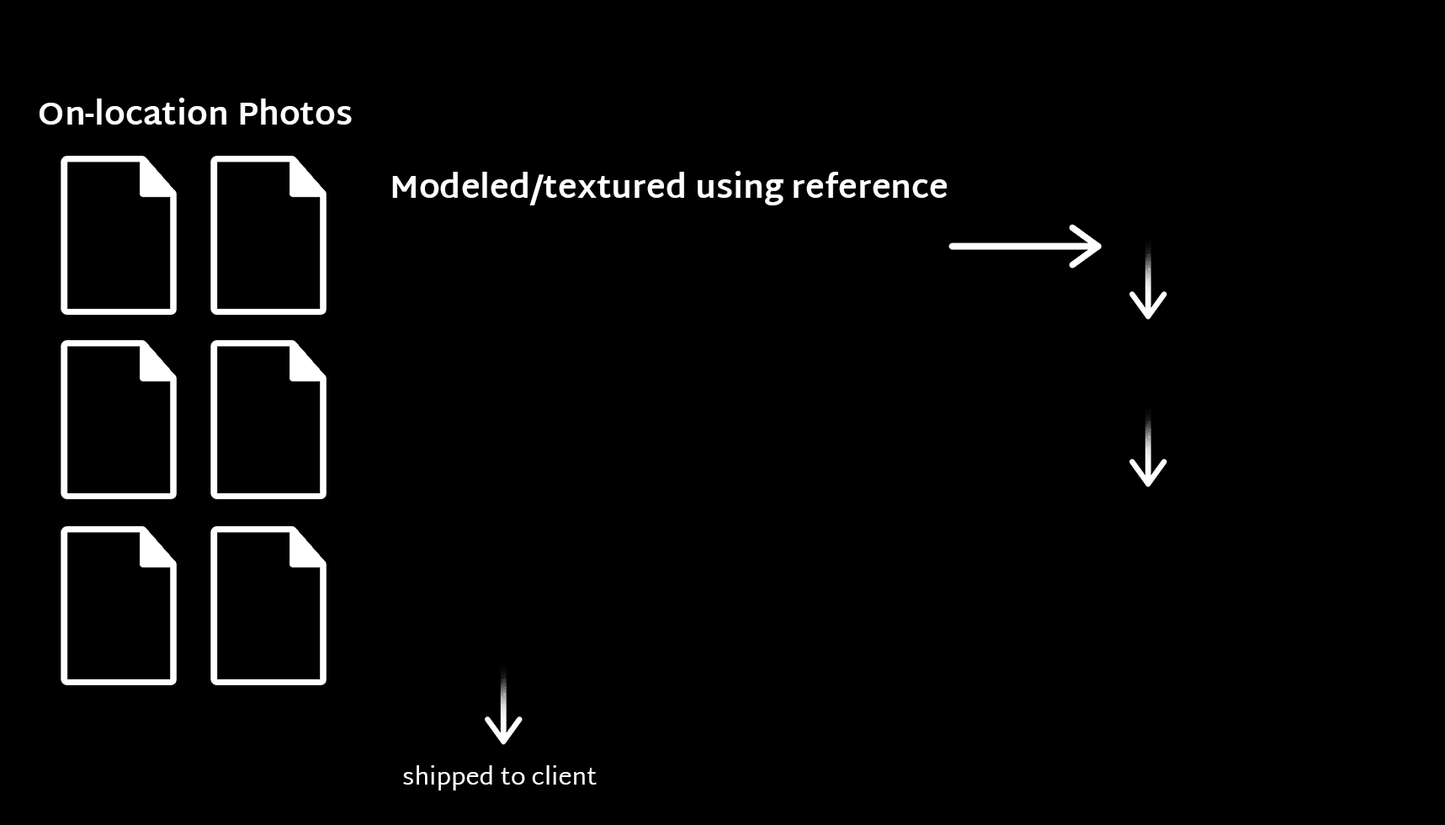
<style>
.page{position:relative;width:1445px;height:825px;background:#000000}
.page>*{position:absolute;margin:0}
.t1{font:32.5px "MartelSans-Bold";color:#ffffff}
.t2{font:24.4px "MartelSans-Regular";color:#ffffff}
</style>
<div class="page">
<p class="t1" style="left:39px;top:98px;width:313px;height:27px">On-location Photos</p>
<p class="t1" style="left:392px;top:171px;width:555px;height:34px">Modeled/textured using reference</p>
<p class="t2" style="left:403px;top:765px;width:194px;height:25px">shipped to client</p>
</div>
